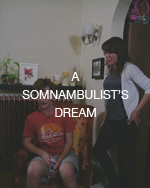
<style>
.page{position:relative;width:150px;height:188px}
.page>*{position:absolute;margin:0}
.t1{font:12px/18px "HelveticaNeue";color:#fefefe}
</style>
<div class="page">
<p class="t1" style="left:22px;top:72px;width:107px;height:45px;text-align:center">A <br>SOMNAMBULIST’S DREAM</p>
</div>
